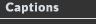
<style>
.page{position:relative;width:96px;height:24px;background:#333333}
.page>*{position:absolute;margin:0}
.t1{font:12px "Lato-Black";letter-spacing:0.05em;color:#d6dbdf}
</style>
<div class="page">
<p class="t1" style="left:5px;top:2px;width:54px;height:12px">Captions</p>
</div>
